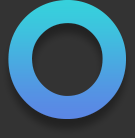
<style>
.page{position:relative;width:135px;height:138px;background:#333333}
.page>*{position:absolute;margin:0}
.t1{font:160.8px "AvantGardeITCbyBT-Demi";letter-spacing:0.04em}
</style>
<div class="page">
<p class="t1" style="left:8px;top:0px;width:118px;height:119px">O</p>
</div>
